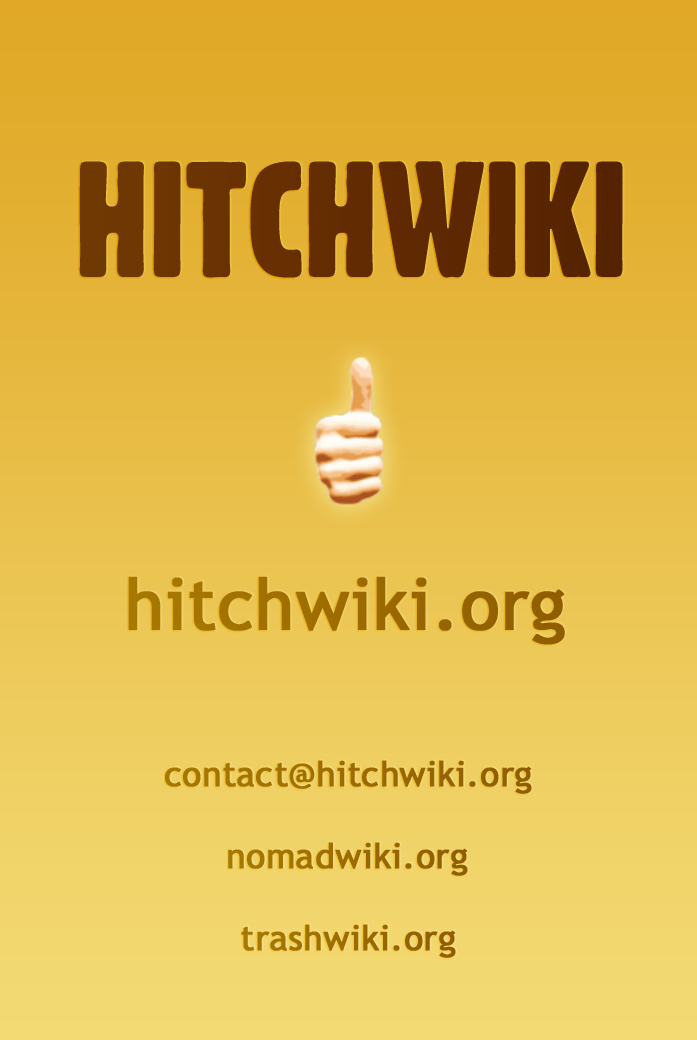
<style>
.page{position:relative;width:697px;height:1040px}
.page>*{position:absolute;margin:0}
.t1{font:160.3px "Gothic821CondensedBT-Regular";color:#632b02;text-transform:uppercase}
.t2{font:71.1px "TrebuchetMS";color:#9d6b00;font-weight:bold}
.t3{font:34.7px "TrebuchetMS";color:#9d6b00;font-weight:bold}
</style>
<div class="page">
<p class="t1" style="left:79px;top:161px;width:544px;height:117px">Hitchwiki</p>
<p class="t2" style="left:128px;top:576px;width:437px;height:69px">hitchwiki.org</p>
<p class="t3" style="left:165px;top:760px;width:367px;height:34px">contact@hitchwiki.org</p>
<p class="t3" style="left:228px;top:842px;width:240px;height:34px">nomadwiki.org</p>
<p class="t3" style="left:241px;top:924px;width:215px;height:34px">trashwiki.org</p>
</div>
